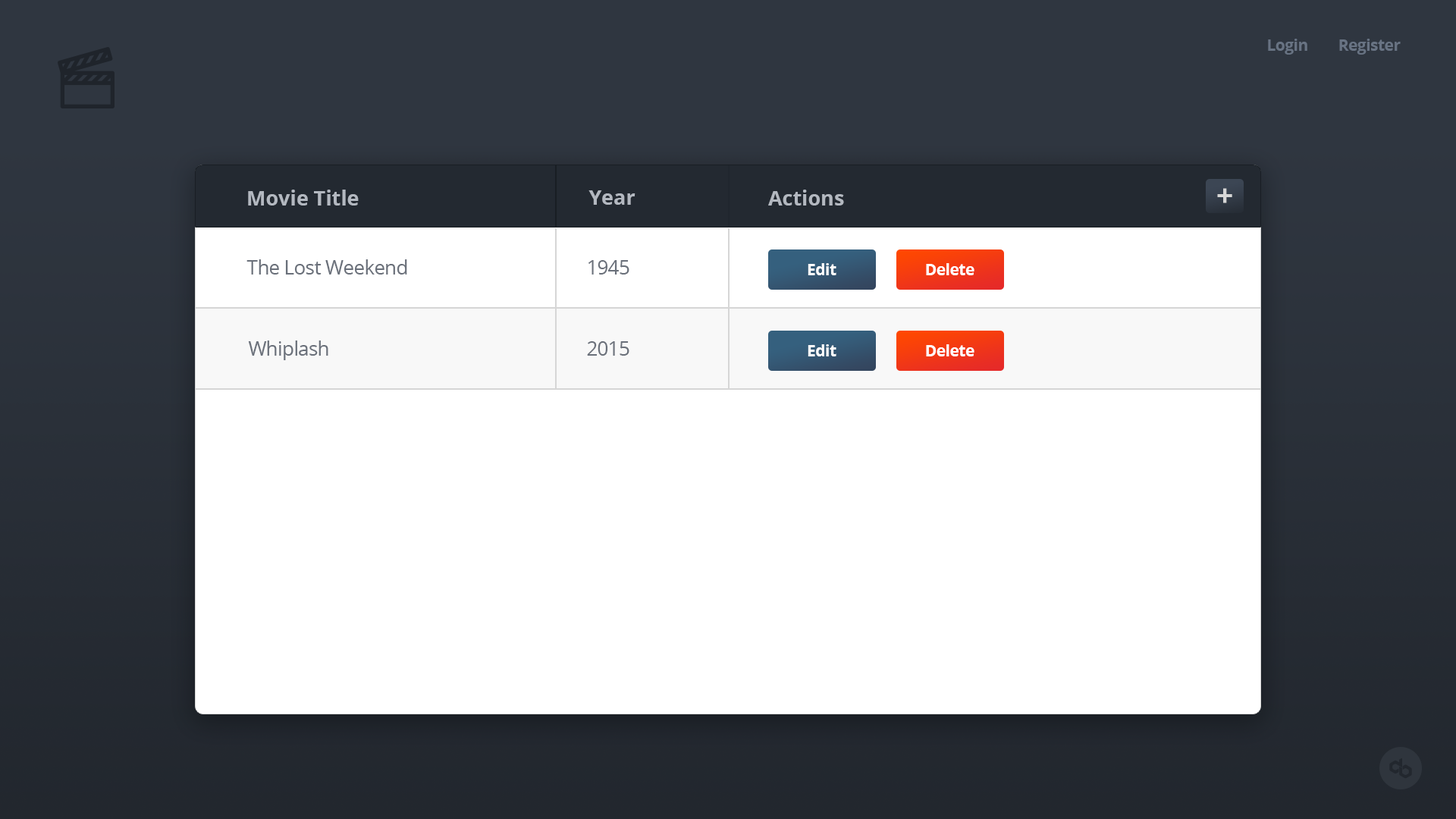
<style>
.page{position:relative;width:1456px;height:819px;background:#ffffff}
.page>*{position:absolute;margin:0}
.t1{font:15.9px "OpenSans-Bold";letter-spacing:-0.025em;color:#687383}
.t2{font:20.5px "OpenSans-Bold";color:#b3b8c0}
.t3{font:29.6px "OpenSans-Bold";letter-spacing:-0.025em;color:#d6d6d6}
.t4{font:19.7px "OpenSans";letter-spacing:-0.025em;color:#6a707a}
.t5{font:15.9px "OpenSans-Bold";letter-spacing:-0.025em;color:#ffffff}
</style>
<div class="page">
<p class="t1" style="left:1268px;top:39px;width:39px;height:16px">Login</p>
<p class="t1" style="left:1339px;top:39px;width:62px;height:16px">Register</p>
<p class="t2" style="left:248px;top:190px;width:111px;height:16px">Movie Title</p>
<p class="t2" style="left:588px;top:190px;width:47px;height:15px">Year</p>
<p class="t2" style="left:768px;top:190px;width:76px;height:16px">Actions</p>
<p class="t3" style="left:1217px;top:188px;width:15px;height:15px">+</p>
<p class="t4" style="left:246px;top:259px;width:161px;height:16px">The Lost Weekend</p>
<p class="t4" style="left:588px;top:260px;width:41px;height:15px">1945</p>
<p class="t5" style="left:808px;top:263px;width:28px;height:12px">Edit</p>
<p class="t5" style="left:926px;top:263px;width:48px;height:12px">Delete</p>
<p class="t4" style="left:248px;top:340px;width:80px;height:20px">Whiplash</p>
<p class="t4" style="left:587px;top:341px;width:42px;height:15px">2015</p>
<p class="t5" style="left:808px;top:344px;width:28px;height:12px">Edit</p>
<p class="t5" style="left:926px;top:344px;width:48px;height:12px">Delete</p>
</div>
